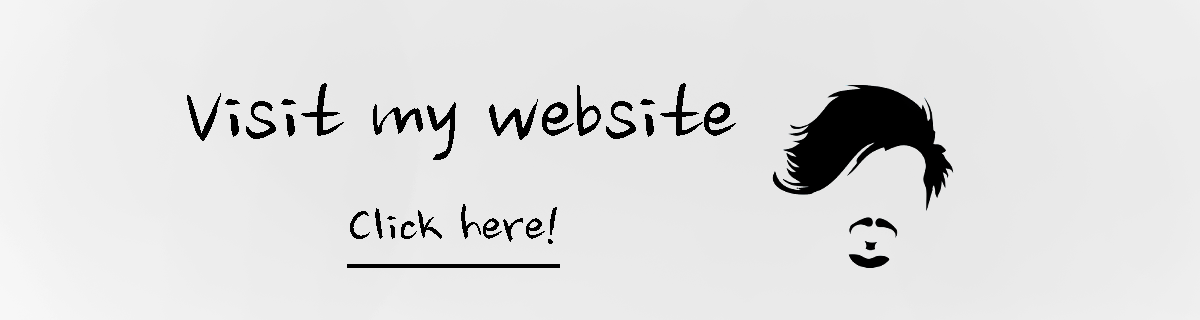
<style>
.page{position:relative;width:1200px;height:320px}
.page>*{position:absolute;margin:0}
.t1{font:100.9px "NanumBrush";color:#000000}
.t2{font:60.9px "NanumBrush";color:#000000;text-decoration:underline}
</style>
<div class="page">
<p class="t1" style="left:187px;top:83px;width:549px;height:77px">Visit my website</p>
<p class="t2" style="left:347px;top:204px;width:213px;height:64px">Click here!</p>
</div>
